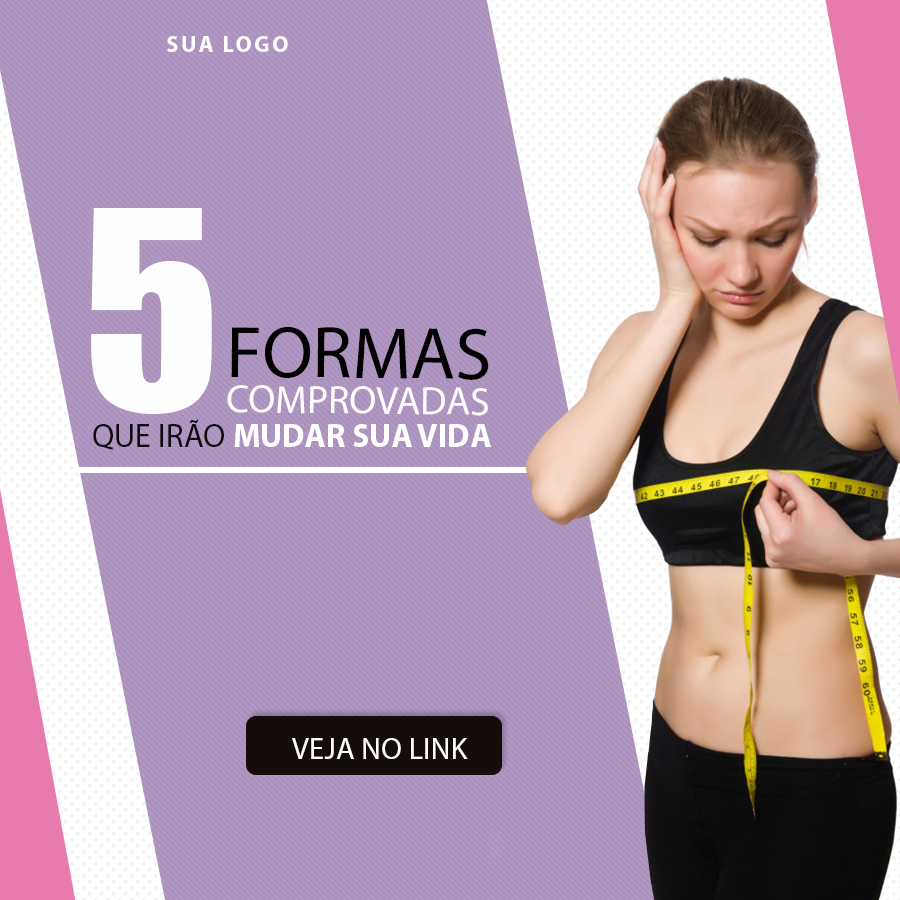
<style>
.page{position:relative;width:900px;height:900px}
.page>*{position:absolute;margin:0}
.t1{font:22.9px "MyriadPro-Bold";letter-spacing:0.1em;color:#fefefe}
.t2{font:255px "Impact";color:#fefefe}
.t3{font:73.6px "MyriadPro-Regular";color:#000000}
.t4{font:39.5px "MyriadPro-Regular";color:#ffffff}
.t5{font:33.1px "MyriadPro-Bold";color:#ffffff}
.t6{font:33.1px "MyriadPro-Regular";color:#0c0c0c}
.t7{font:30.5px "MyriadPro-Regular";color:#fefefe}
</style>
<div class="page">
<p class="t1" style="left:167px;top:36px;width:121px;height:16px">SUA LOGO</p>
<p class="t2" style="left:91px;top:208px;width:121px;height:206px">5</p>
<p class="t3" style="left:231px;top:326px;width:258px;height:54px;rotate:1deg">FORMAS</p>
<p class="t4" style="left:227px;top:385px;width:261px;height:31px;rotate:1deg">COMPROVADAS</p>
<p class="t5" style="left:93px;top:419px;width:398px;height:31px"><span class="t6">QUE IRÃO </span>MUDAR SUA VIDA</p>
<p class="t7" style="left:292px;top:738px;width:176px;height:21px">VEJA NO LINK</p>
</div>
